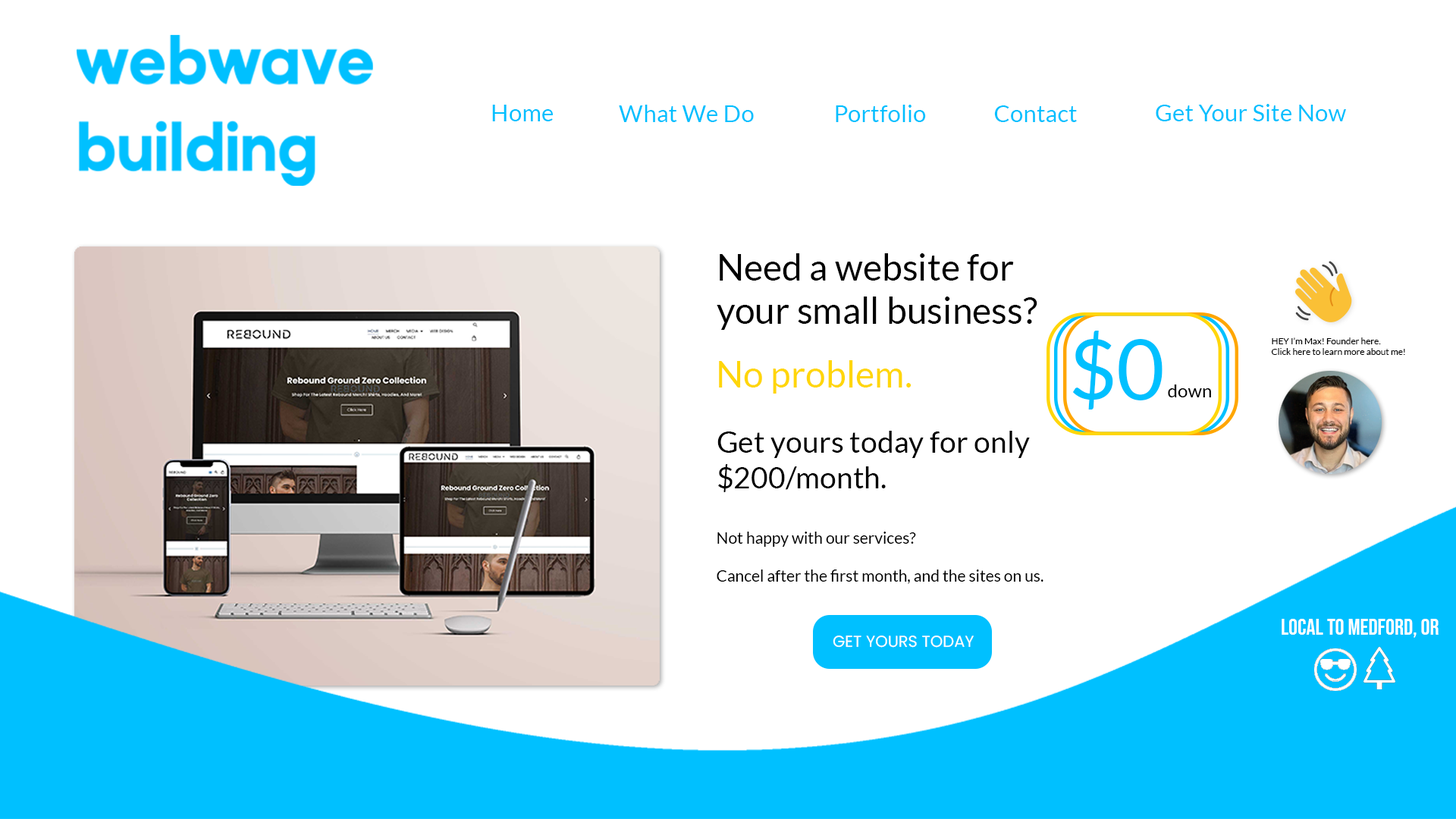
<style>
.page{position:relative;width:1456px;height:819px;background:#ffffff}
.page>*{position:absolute;margin:0}
.t1{font:23.9px "Lato-Regular";color:#00c0ff}
.t2{font:15.9px "Lato-Regular";color:#000000}
.t3{font:36.4px "Lato-Regular";color:#000000}
.t4{font:29.8px "Lato-Regular";color:#000000}
.t5{font:83.4px "Lato-Regular";color:#00c0ff}
.t6{font:8.9px "Lato-Regular";color:#000000}
.t7{font:36.4px "Lato-Regular";color:#ffd60a}
.t8{font:18.2px "Lato-Regular";color:#000000}
.t9{font:22.7px "BebasNeue-Regular";color:#ffffff}
.t10{font:15.9px "Poppins-Regular";color:#ffffff}
</style>
<div class="page">
<p class="t1" style="left:492px;top:105px;width:61px;height:16px">Home</p>
<p class="t1" style="left:619px;top:105px;width:135px;height:17px">What We Do</p>
<p class="t1" style="left:836px;top:105px;width:90px;height:17px">Portfolio</p>
<p class="t1" style="left:994px;top:105px;width:83px;height:17px">Contact</p>
<p class="t1" style="left:1156px;top:104px;width:190px;height:17px">Get Your Site Now</p>
<p class="t2" style="left:717px;top:253px;width:326px;height:331px"><span class="t3">Need a website for your small business? <br><br></span><span class="t4"><br>Get yours today for only $200/month. <br><br></span>Not happy with our services?<br><br>Cancel after the first month, and the sites on us.</p>
<p class="t5" style="left:1072px;top:331px;width:91px;height:78px">$0</p>
<p class="t6" style="left:1271px;top:337px;width:134px;height:18px">HEY I’m Max! Founder here. <br>Click here to learn more about me!</p>
<p class="t7" style="left:719px;top:360px;width:193px;height:34px">No problem.</p>
<p class="t8" style="left:1168px;top:384px;width:43px;height:13px">down</p>
<p class="t9" style="left:1282px;top:619px;width:157px;height:19px">LOCAL TO MEDFORD, OR</p>
<p class="t10" style="left:833px;top:635px;width:141px;height:13px">GET YOURS TODAY</p>
</div>
